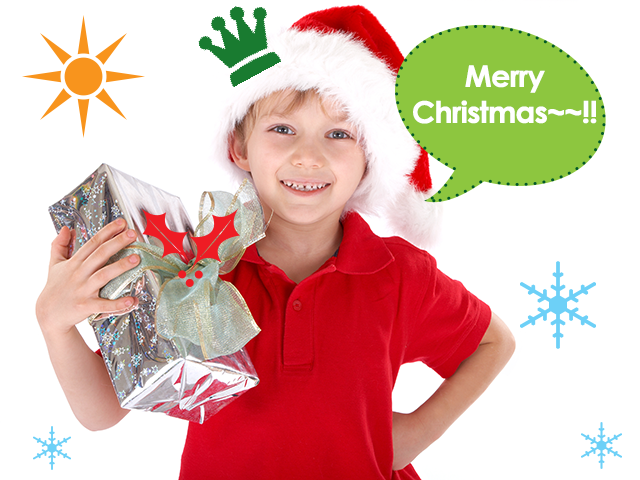
<style>
.page{position:relative;width:640px;height:480px;background:#ffffff}
.page>*{position:absolute;margin:0}
.t1{font:30px "CenturyGothic-Bold";letter-spacing:-0.05em;color:#ffffff;font-weight:bold}
</style>
<div class="page">
<p class="t1" style="left:413px;top:65px;width:184px;height:59px;text-align:center">Merry<br>Christmas~~!!</p>
</div>
